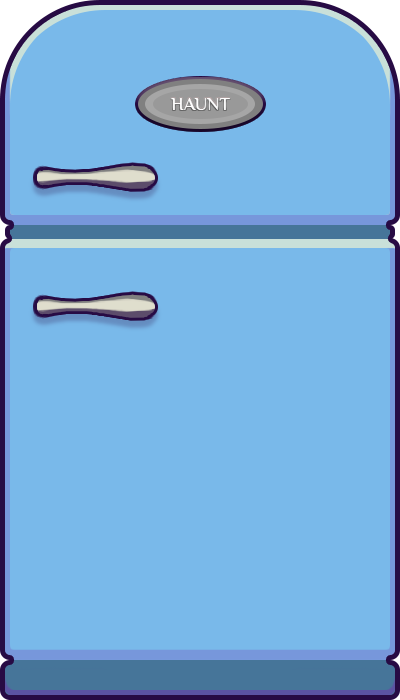
<style>
.page{position:relative;width:400px;height:700px;background:#79b9ea}
.page>*{position:absolute;margin:0}
.t1{font:18px "Philosopher";color:#ffffff}
</style>
<div class="page">
<p class="t1" style="left:171px;top:98px;width:59px;height:12px">HAUNT</p>
</div>
